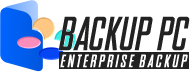
<style>
.page{position:relative;width:190px;height:72px;background:#ffffff}
.page>*{position:absolute;margin:0}
.t1{font:48px "SNES-Italic";color:#333333}
.t2{font:48px "SNES-Italic";color:#222222}
.t3{font:18px "SNES-Italic";color:#ffffff}
.t4{font:18px "SNES-Italic"}
</style>
<div class="page">
<p class="t1" style="left:58px;top:16px;width:132px;height:35px">BACKUP PC</p>
<p class="t1" style="left:58px;top:16px;width:132px;height:35px">BACKUP PC</p>
<p class="t2" style="left:58px;top:16px;width:132px;height:35px">BACKUP PC</p>
<p class="t3" style="left:60px;top:54px;width:128px;height:14px">E N T E R P R I S E-B A C K U P</p>
<p class="t3" style="left:60px;top:54px;width:128px;height:14px">E N T E R P R I S E-B A C K U P</p>
<p class="t4" style="left:61px;top:54px;width:128px;height:14px">E N T E R P R I S E-B A C K U P</p>
</div>
